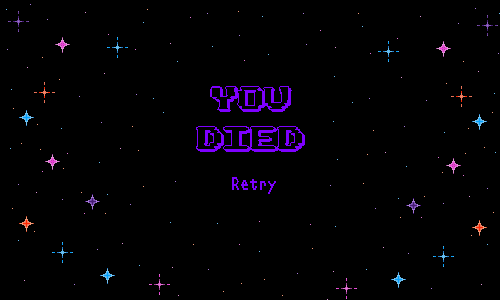
<style>
.page{position:relative;width:500px;height:300px;background:#000000}
.page>*{position:absolute;margin:0}
.t1{font:33.5px "CCPixelArcade-Cartridge";color:#7e00ff}
.t2{font:18px "Receipt-Narrow";color:#7e00ff}
</style>
<div class="page">
<p class="t1" style="left:196px;top:86px;width:109px;height:66px;text-align:center">you<br>died</p>
<p class="t2" style="left:232px;top:177px;width:44px;height:17px">Retry</p>
</div>
